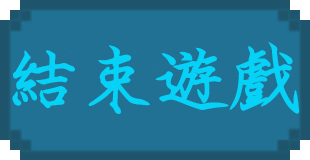
<style>
.page{position:relative;width:310px;height:160px;background:#207193}
.page>*{position:absolute;margin:0}
.t1{font:73.7px "HanWangWCL07";color:#06d2f7}
</style>
<div class="page">
<p class="t1" style="left:12px;top:42px;width:288px;height:72px">結束遊戲</p>
</div>
